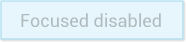
<style>
.page{position:relative;width:186px;height:42px;background:#e6f6fc}
.page>*{position:absolute;margin:0}
.t1{font:18px "Roboto-Regular";color:#b0bbbf}
</style>
<div class="page">
<p class="t1" style="left:21px;top:13px;width:140px;height:15px">Focused disabled</p>
</div>
